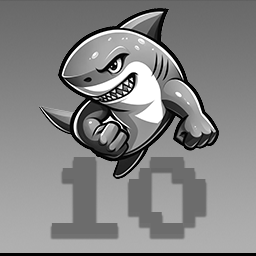
<style>
.page{position:relative;width:256px;height:256px}
.page>*{position:absolute;margin:0}
.t1{font:87.2px "PressStart2P-Regular";color:#6c6c6c}
</style>
<div class="page">
<p class="t1" style="left:51px;top:157px;width:155px;height:77px">10</p>
</div>
